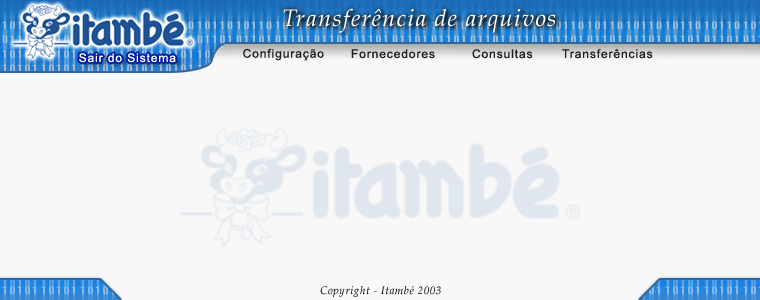
<style>
.page{position:relative;width:760px;height:300px;background:#f8f8f8}
.page>*{position:absolute;margin:0}
.t1{font:24px "PalatinoLinotype-Italic";letter-spacing:0.05em;color:#ffffff}
.t2{font:12px "ArialMT";letter-spacing:0.075em;color:#ffffff}
.t3{font:12px "ArialMT";letter-spacing:0.075em;color:#1e1e1e}
.t4{font:11px "PalatinoLinotype-Italic";letter-spacing:0.05em;color:#000000}
</style>
<div class="page">
<p class="t1" style="left:283px;top:8px;width:273px;height:25px">Transferência de arquivos</p>
<p class="t2" style="left:79px;top:53px;width:97px;height:10px">Sair do Sistema</p>
<p class="t3" style="left:243px;top:48px;width:81px;height:13px">Configuração</p>
<p class="t3" style="left:351px;top:49px;width:84px;height:10px">Fornecedores</p>
<p class="t3" style="left:472px;top:49px;width:61px;height:10px">Consultas</p>
<p class="t3" style="left:562px;top:49px;width:91px;height:10px">Transferências</p>
<p class="t4" style="left:320px;top:286px;width:121px;height:11px">Copyright - Itambé 2003</p>
</div>
